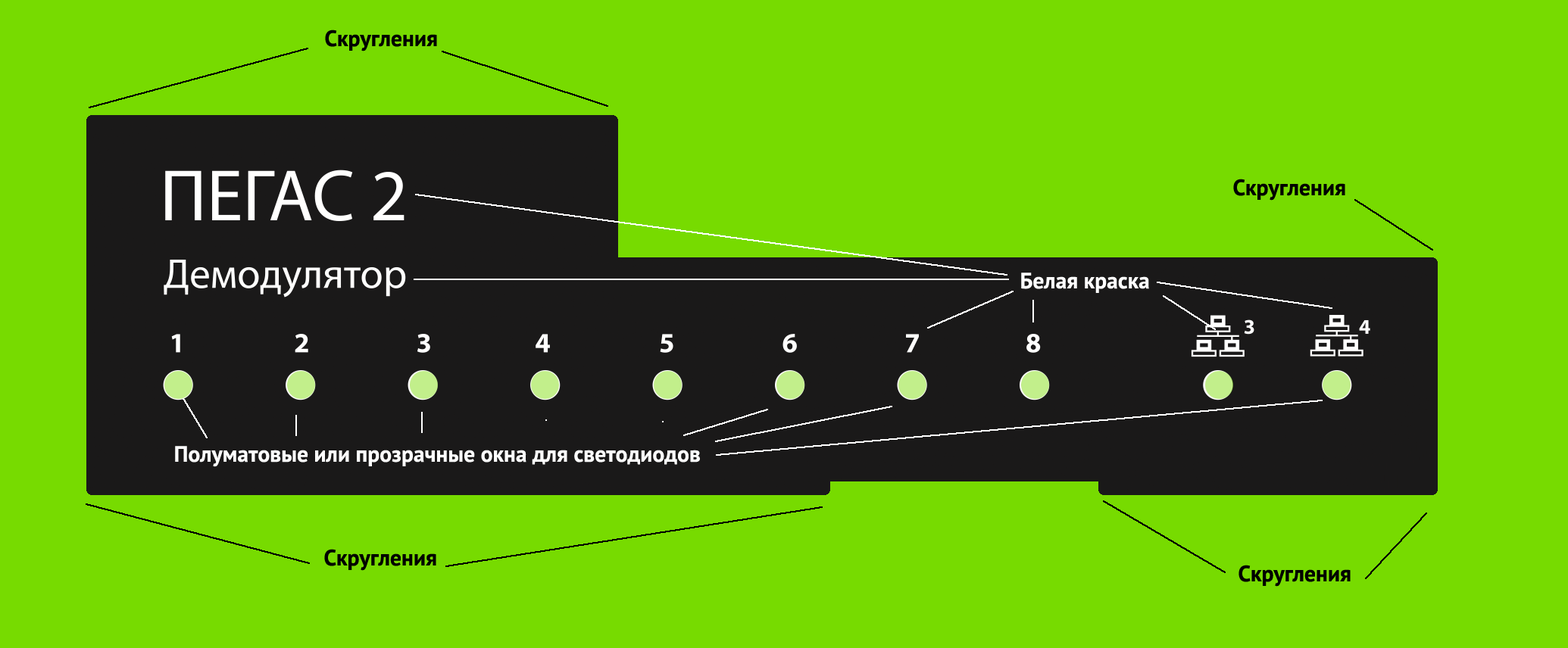
<style>
.page{position:relative;width:1568px;height:648px;background:#77db00}
.page>*{position:absolute;margin:0}
.t1{font:22.4px "PTSans-Bold";color:#000000}
.t2{font:22.4px "PTSans-Bold";color:#ffffff}
</style>
<div class="page">
<p class="t1" style="left:325px;top:30px;width:112px;height:22px">Скругления</p>
<p class="t1" style="left:1233px;top:179px;width:112px;height:22px">Скругления</p>
<p class="t2" style="left:1021px;top:273px;width:128px;height:20px">Белая краска</p>
<p class="t2" style="left:175px;top:446px;width:525px;height:21px">Полуматовые или прозрачные окна для светодиодов</p>
<p class="t1" style="left:324px;top:549px;width:112px;height:22px">Скругления</p>
<p class="t1" style="left:1238px;top:565px;width:113px;height:22px">Скругления</p>
</div>
